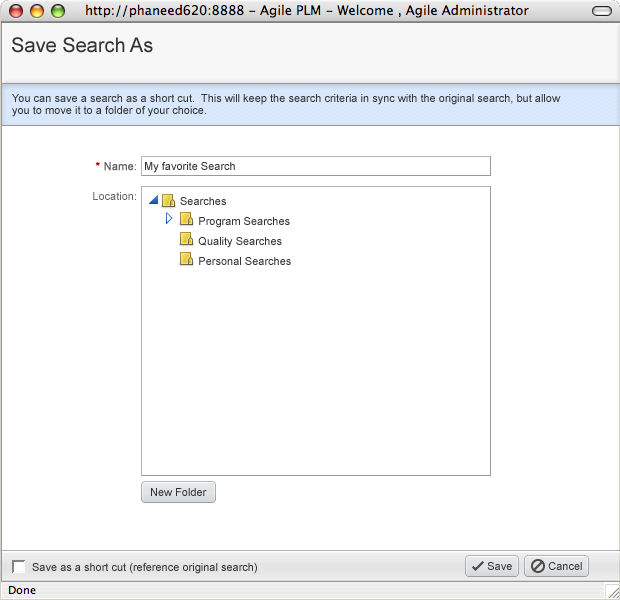
<style>
.page{position:relative;width:620px;height:600px;background:#ffffff}
.page>*{position:absolute;margin:0}
.t1{font:20px "ArialMT";color:#333333}
.t2{font:11px/12px "ArialMT";color:#333333}
.t3{font:11px/30px "ArialMT";color:#666666}
.t4{font:11px/30px "ArialMT";color:#990000;font-weight:bold}
.t5{font:11px/30px "ArialMT";color:#666666;font-weight:bold}
.t6{font:11px "ArialMT";color:#333333}
.t7{font:11px/20px "ArialMT";color:#333333}
</style>
<div class="page">
<p class="t1" style="left:12px;top:37px;width:141px;height:16px">Save Search As</p>
<p class="t2" style="left:12px;top:94px;width:549px;height:23px">You can save a search as a short cut.  This will keep the search criteria in sync with the original search, but allow<br>you to move it to a folder of your choice.</p>
<p class="t3" style="left:93px;top:162px;width:43px;height:38px;text-align:right"><span class="t4">*</span><span class="t5"> Name</span>:<br>Location:</p>
<p class="t6" style="left:145px;top:162px;width:90px;height:11px">My favorite Search</p>
<p class="t7" style="left:180px;top:197px;width:111px;height:68px">Searches<br>      Program Searches<br>      Quality Searches<br>      Personal Searches</p>
<p class="t6" style="left:151px;top:488px;width:56px;height:8px">New Folder</p>
<p class="t6" style="left:32px;top:563px;width:225px;height:11px">Save as a short cut (reference original search)</p>
<p class="t6" style="left:487px;top:562px;width:25px;height:8px">Save</p>
<p class="t6" style="left:548px;top:562px;width:34px;height:8px">Cancel</p>
</div>
